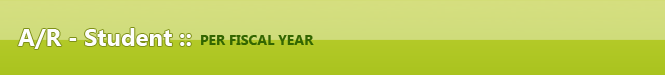
<style>
.page{position:relative;width:665px;height:75px}
.page>*{position:absolute;margin:0}
.t1{font:24px "SegoeUI-Bold";color:#fefefe}
.t2{font:14px "SegoeUI-Bold";color:#336600}
</style>
<div class="page">
<p class="t1" style="left:18px;top:28px;width:173px;height:21px">A/R - Student ::</p>
<p class="t2" style="left:201px;top:35px;width:113px;height:10px">PER FISCAL YEAR</p>
</div>
